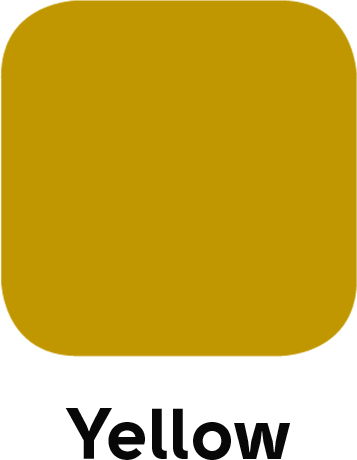
<style>
.page{position:relative;width:357px;height:460px;background:#c19700}
.page>*{position:absolute;margin:0}
.t1{font:72px "Solomon-Sans-Bold";color:#080808}
</style>
<div class="page">
<p class="t1" style="left:65px;top:408px;width:225px;height:52px">Yellow</p>
</div>
